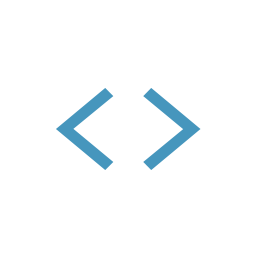
<style>
.page{position:relative;width:256px;height:256px;background:#ffffff}
.page>*{position:absolute;margin:0}
.t1{font:150px "Consolas";color:#4696bd}
</style>
<div class="page">
<p class="t1" style="left:56px;top:88px;width:145px;height:82px">&lt;&gt;</p>
</div>
